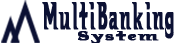
<style>
.page{position:relative;width:176px;height:43px;background:#ffffff}
.page>*{position:absolute;margin:0}
.t1{font:41px "Hellbound";letter-spacing:0.046em;color:#0b1033;font-weight:bold;scale:0.41 1}
.t2{font:41px "Alankaram-Plain";letter-spacing:0.046em;color:#0b1033;font-weight:bold;scale:0.41 1}
.t3{font:13.8px "Hellbound";letter-spacing:0.046em;color:#0b1033;font-weight:bold;scale:1.48 1}
</style>
<div class="page">
<p class="t1" style="left:42px;top:2px;width:132px;height:37px"><span class="t2"> </span>MultiBanking</p>
<p class="t3" style="left:78px;top:31px;width:81px;height:13px">System</p>
</div>
